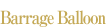
<style>
.page{position:relative;width:106px;height:27px;background:#ffffff}
.page>*{position:absolute;margin:0}
.t1{font:18px "RyuminPro-ExBold";letter-spacing:-0.08em;color:#c4a956;scale:0.85 1}
</style>
<div class="page">
<p class="t1" style="left:0px;top:10px;width:106px;height:17px">Barrage Balloon</p>
</div>
